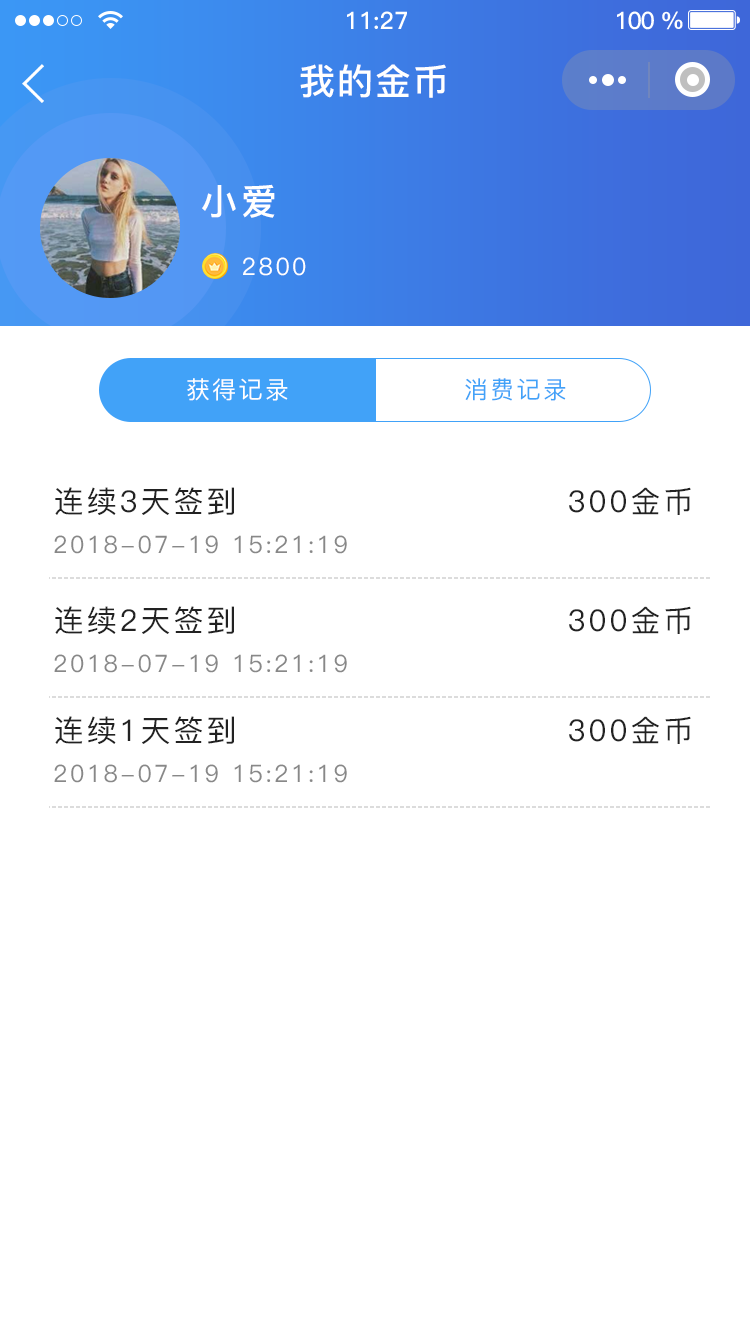
<style>
.page{position:relative;width:750px;height:1334px;background:#ffffff}
.page>*{position:absolute;margin:0}
.t1{font:24px "PingFang-SC-Bold";color:#ffffff}
.t2{font:24px "PingFang-SC-Bold";letter-spacing:-0.05em;color:#ffffff}
.t3{font:36px "PingFang-SC-Bold";letter-spacing:0.05em;color:#ffffff}
.t4{font:36px "PingFang-SC-Bold";letter-spacing:0.1em;color:#ffffff}
.t5{font:24px "PingFang-SC-Medium";letter-spacing:0.1em;color:#ffffff}
.t6{font:24px "PingFang-SC-Medium";letter-spacing:0.1em;color:#41a2f8}
.t7{font:30px "PingFang-SC-Medium";letter-spacing:0.1em;color:#222222}
.t8{font:24px "PingFang-SC-Medium";letter-spacing:0.1em;color:#888888}
</style>
<div class="page">
<p class="t1" style="left:347px;top:11px;width:60px;height:18px">11:27</p>
<p class="t2" style="left:617px;top:11px;width:66px;height:19px">100 %</p>
<p class="t3" style="left:300px;top:64px;width:146px;height:34px">我的金币</p>
<p class="t4" style="left:202px;top:184px;width:73px;height:34px">小爱</p>
<p class="t5" style="left:243px;top:257px;width:63px;height:19px">2800</p>
<p class="t5" style="left:187px;top:378px;width:101px;height:23px">获得记录</p>
<p class="t6" style="left:465px;top:378px;width:101px;height:23px">消费记录</p>
<p class="t7" style="left:55px;top:487px;width:179px;height:28px">连续3天签到</p>
<p class="t7" style="left:569px;top:487px;width:122px;height:28px">300金币</p>
<p class="t8" style="left:54px;top:535px;width:293px;height:19px">2018-07-19 15:21:19</p>
<p class="t7" style="left:55px;top:606px;width:179px;height:28px">连续2天签到</p>
<p class="t7" style="left:569px;top:606px;width:122px;height:28px">300金币</p>
<p class="t8" style="left:54px;top:654px;width:293px;height:19px">2018-07-19 15:21:19</p>
<p class="t7" style="left:55px;top:716px;width:179px;height:28px">连续1天签到</p>
<p class="t7" style="left:569px;top:716px;width:122px;height:28px">300金币</p>
<p class="t8" style="left:54px;top:764px;width:293px;height:19px">2018-07-19 15:21:19</p>
</div>
